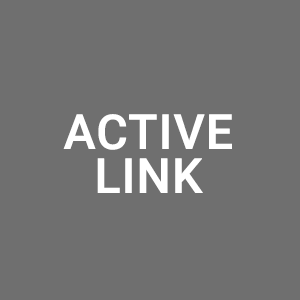
<style>
.page{position:relative;width:300px;height:300px;background:#6f6f6f}
.page>*{position:absolute;margin:0}
.t1{font:48px/44px "Roboto-Medium";color:#ffffff;text-transform:uppercase;font-weight:bold}
</style>
<div class="page">
<p class="t1" style="left:63px;top:114px;width:169px;height:79px;text-align:center">Active<br>Link</p>
</div>
